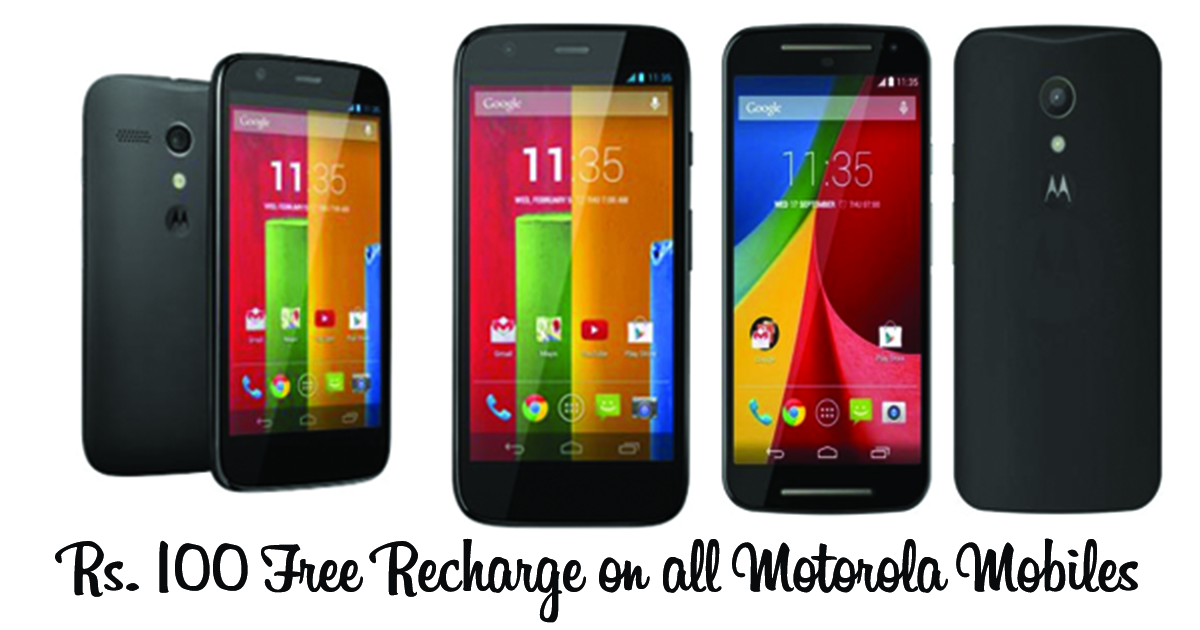
<style>
.page{position:relative;width:1200px;height:630px;background:#ffffff}
.page>*{position:absolute;margin:0}
.t1{font:76px "Billabong";color:#080a0b}
</style>
<div class="page">
<p class="t1" style="left:55px;top:538px;width:1083px;height:85px">Rs. 100 Free Recharge on all Motorola Mobiles</p>
</div>
